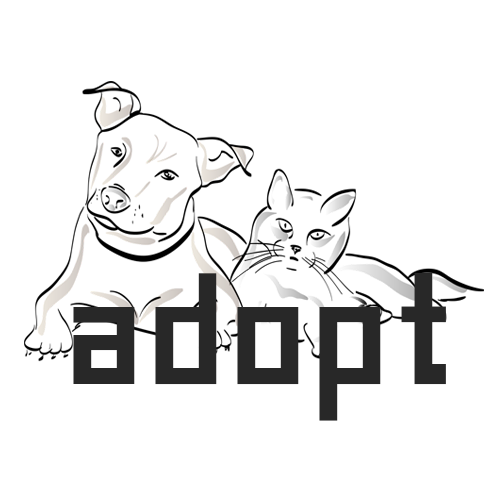
<style>
.page{position:relative;width:500px;height:500px;background:#ffffff}
.page>*{position:absolute;margin:0}
.t1{font:196px "H2sa1M";color:#282828;scale:1.08 1}
</style>
<div class="page">
<p class="t1" style="left:73px;top:272px;width:373px;height:149px">adopt</p>
</div>
